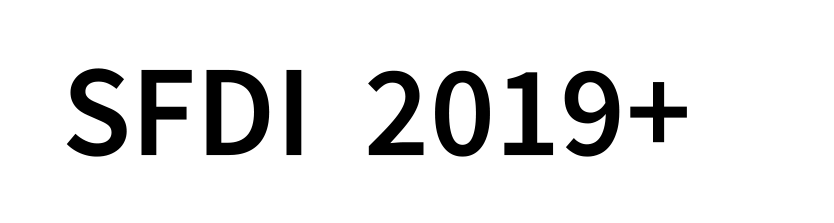
<style>
.page{position:relative;width:834px;height:223px;background:#ffffff}
.page>*{position:absolute;margin:0}
.t1{font:130px "SourceSansPro-Semibold";color:#000000}
</style>
<div class="page">
<p class="t1" style="left:66px;top:68px;width:621px;height:89px">SFDI  2019+</p>
</div>
